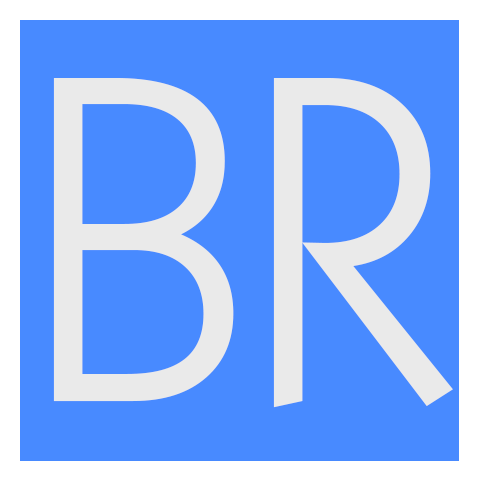
<style>
.page{position:relative;width:479px;height:481px;background:#488aff}
.page>*{position:absolute;margin:0}
.t1{font:472px "KabelITCbyBT-Book";color:#eaeaea}
</style>
<div class="page">
<p class="t1" style="left:53px;top:78px;width:400px;height:330px">BR</p>
</div>
